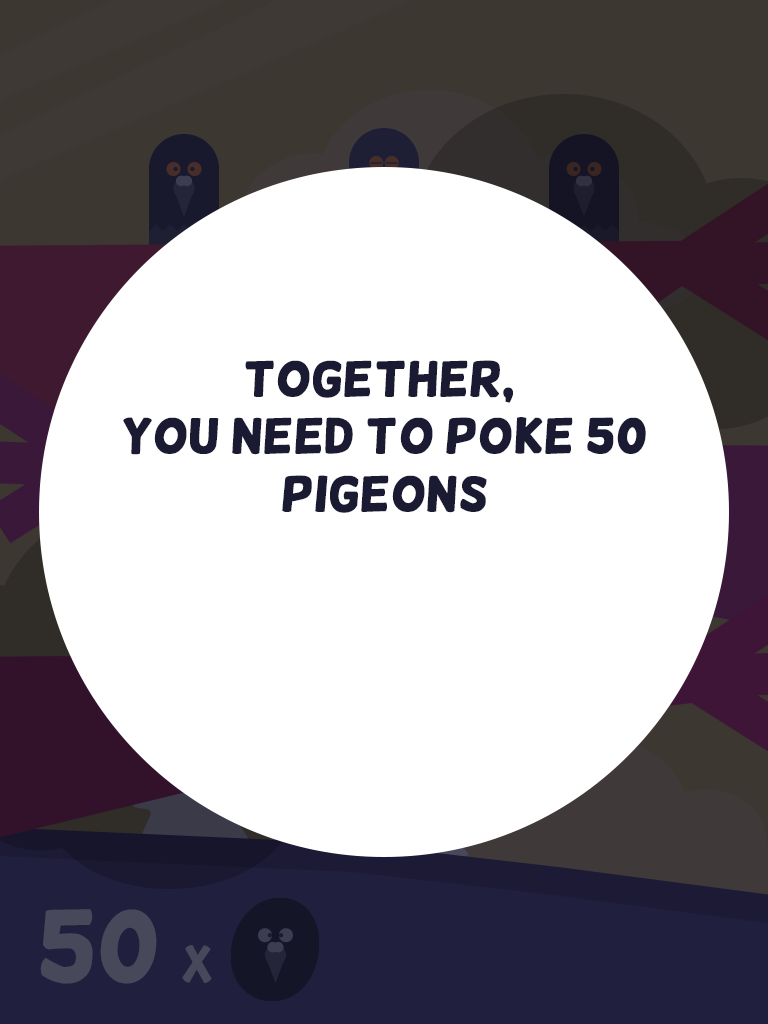
<style>
.page{position:relative;width:768px;height:1024px;background:#ffffff}
.page>*{position:absolute;margin:0}
.t1{font:48px "Helsinki";color:#1a1a32;font-weight:bold}
.t2{font:100px "Helsinki";color:#48485b}
.t3{font:50px "Helsinki";color:#48485b}
</style>
<div class="page">
<p class="t1" style="left:123px;top:360px;width:523px;height:153px;text-align:center">Together, <br>you need to poke 50<br>pigeons</p>
<p class="t2" style="left:40px;top:909px;width:172px;height:75px">50 <span class="t3">x</span></p>
</div>
